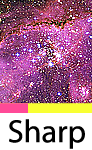
<style>
.page{position:relative;width:92px;height:150px;background:#ffffff}
.page>*{position:absolute;margin:0}
.t1{font:32.3px "MyriadPro-Regular";color:#000000}
</style>
<div class="page">
<p class="t1" style="left:9px;top:119px;width:76px;height:30px">Sharp</p>
</div>
